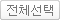
<style>
.page{position:relative;width:60px;height:20px;background:#ffffff}
.page>*{position:absolute;margin:0}
.t1{font:12px "Dotum";color:#757575}
</style>
<div class="page">
<p class="t1" style="left:7px;top:5px;width:46px;height:11px">전체선택</p>
</div>
